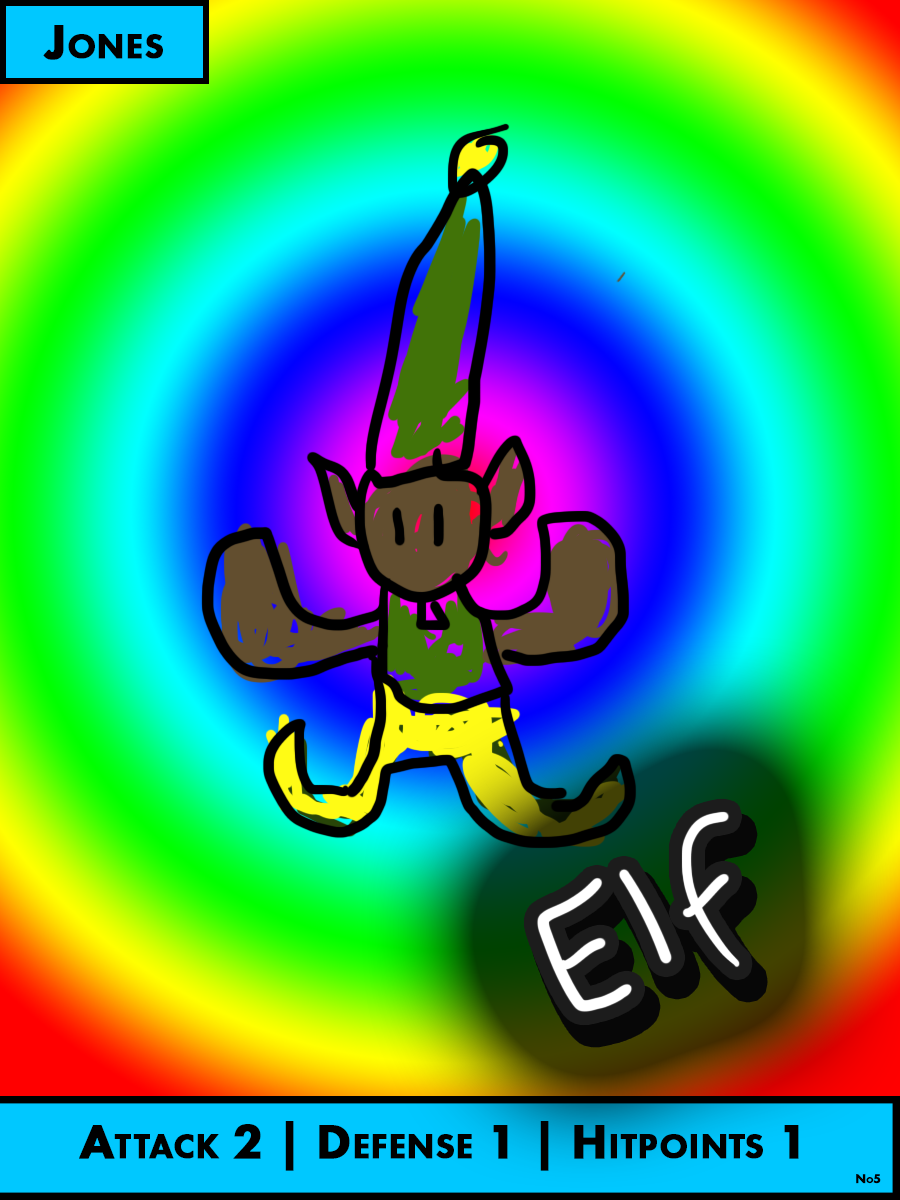
<style>
.page{position:relative;width:900px;height:1200px}
.page>*{position:absolute;margin:0}
.t1{font:50px "FuturaPT-Heavy";color:#000000;font-variant:small-caps;font-weight:bold}
.t2{font:12.5px "FuturaPT-Heavy";color:#000000;font-variant:small-caps;font-weight:bold}
</style>
<div class="page">
<p class="t1" style="left:43px;top:25px;width:120px;height:35px">Jones</p>
<p class="t1" style="left:79px;top:1121px;width:720px;height:50px">Attack 2 | Defense 1 | Hitpoints 1</p>
<p class="t2" style="left:856px;top:1174px;width:25px;height:10px">No5</p>
</div>
